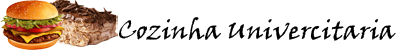
<style>
.page{position:relative;width:400px;height:50px;background:#ffffff}
.page>*{position:absolute;margin:0}
.t1{font:26px "VinerHandITC";color:#000000}
</style>
<div class="page">
<p class="t1" style="left:118px;top:17px;width:278px;height:24px">Cozinha Univercitaria</p>
</div>
